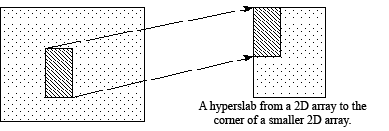
<style>
.page{position:relative;width:389px;height:131px;background:#ffffff}
.page>*{position:absolute;margin:0}
.t1{font:12px "TimesNewRomanPSMT";color:#000000}
</style>
<div class="page">
<p class="t1" style="left:198px;top:101px;width:169px;height:26px;text-align:center">A hyperslab from a 2D array to the<br>corner of a smaller 2D array.</p>
</div>
